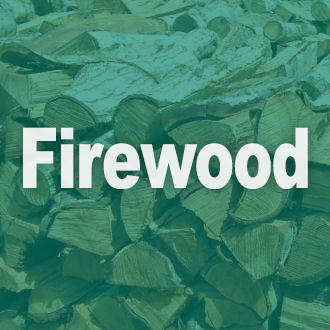
<style>
.page{position:relative;width:330px;height:330px}
.page>*{position:absolute;margin:0}
.t1{font:84px "Arial-Black";letter-spacing:-0.025em;color:#ffffff;scale:0.71 1}
</style>
<div class="page">
<p class="t1" style="left:23px;top:127px;width:285px;height:62px;opacity:0.85">Firewood</p>
</div>
